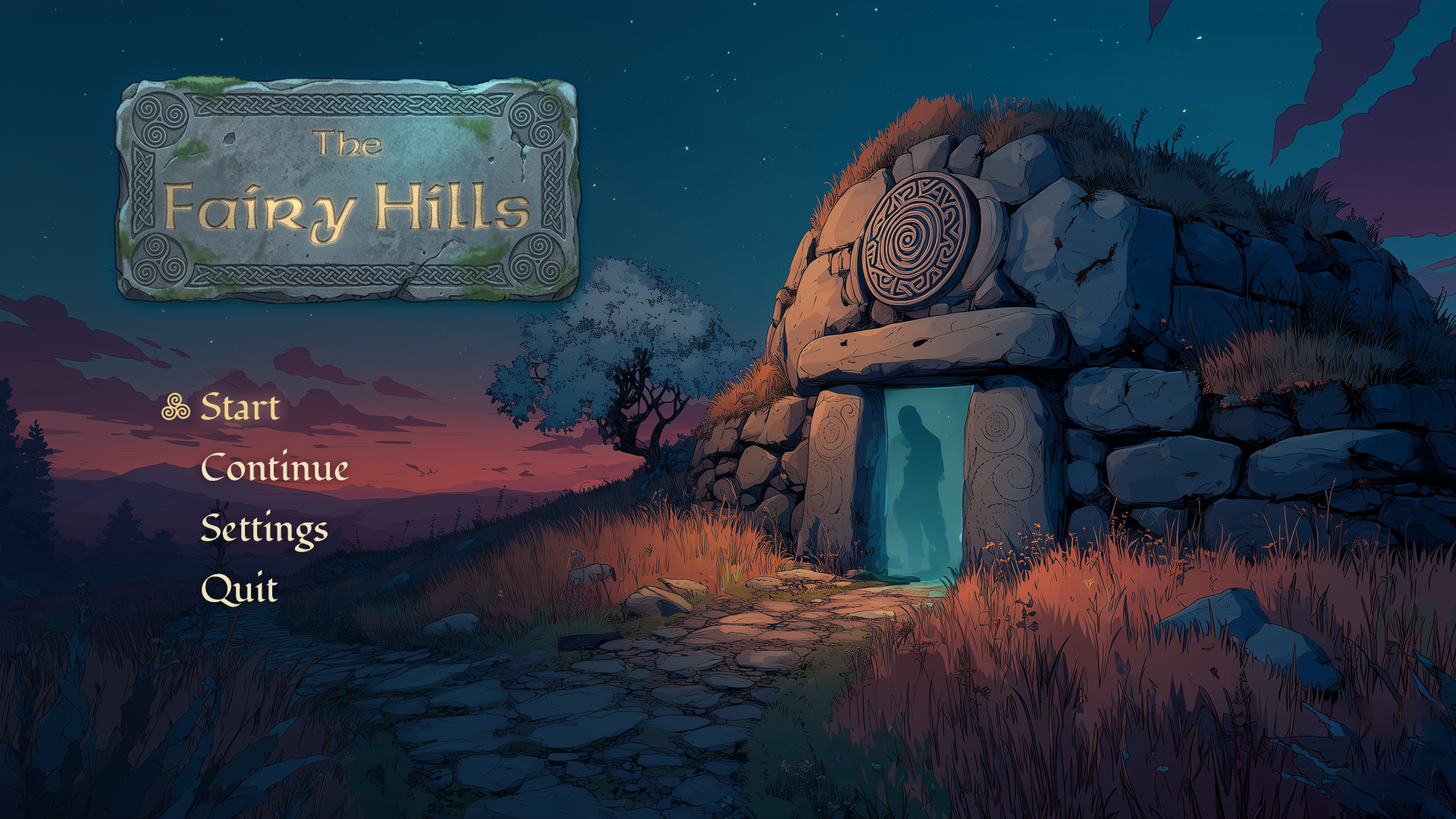
<style>
.page{position:relative;width:1456px;height:819px}
.page>*{position:absolute;margin:0}
.t1{font:37.9px "Fondamento-Regular";color:#f2d28a}
.t2{font:37.9px "Fondamento-Regular";color:#efe3c2}
</style>
<div class="page">
<p class="t1" style="left:201px;top:392px;width:80px;height:28px">Start</p>
<p class="t2" style="left:202px;top:448px;width:148px;height:33px">Continue</p>
<p class="t2" style="left:201px;top:509px;width:127px;height:43px">Settings</p>
<p class="t2" style="left:202px;top:570px;width:76px;height:37px">Quit</p>
</div>
